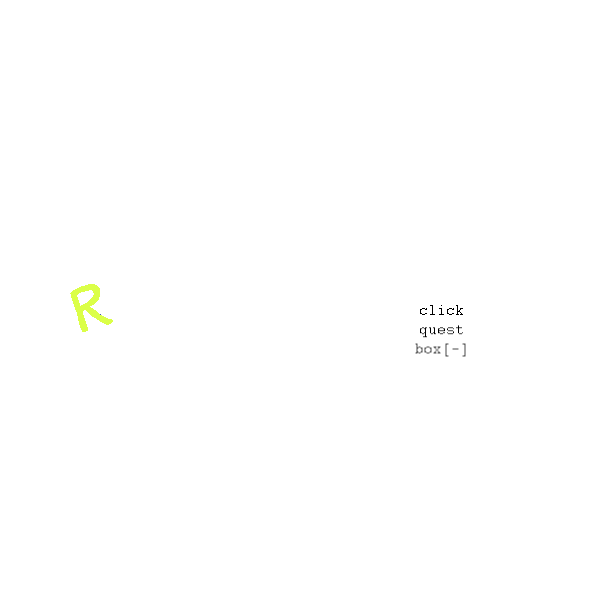
<style>
.page{position:relative;width:600px;height:600px;background:#ffffff}
.page>*{position:absolute;margin:0}
.t1{font:16px "Courier";color:#000000}
</style>
<div class="page">
<p class="t1" style="left:415px;top:305px;width:51px;height:52px;text-align:center">click<br>quest<br>box[-]</p>
</div>
